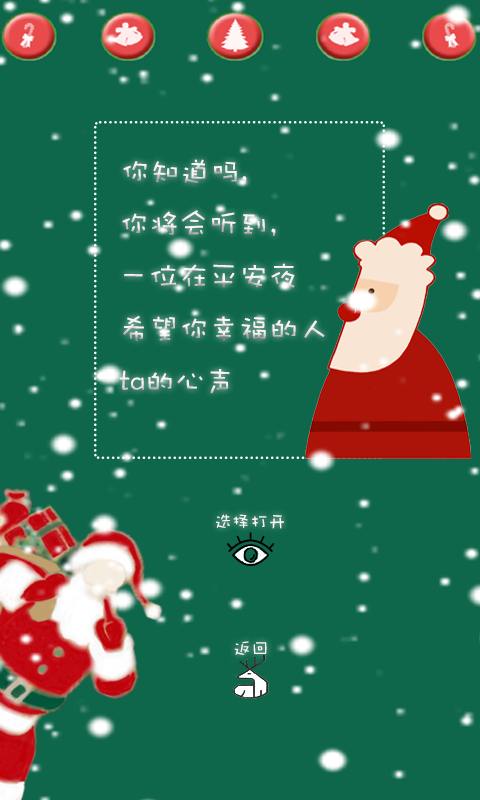
<style>
.page{position:relative;width:480px;height:800px;background:#0f674b}
.page>*{position:absolute;margin:0}
.t1{font:30px "DFWaWaSC-W5";color:#f4eae9}
.t2{font:18px "DFWaWaSC-W5";color:#fcf7f7}
</style>
<div class="page">
<p class="t1" style="left:119px;top:159px;width:206px;height:235px">你知道吗，<br>你将会听到，<br>一位在平安夜<br>希望你幸福的人<br>ta的心声</p>
<p class="t2" style="left:216px;top:514px;width:68px;height:15px">选择打开</p>
<p class="t2" style="left:234px;top:641px;width:33px;height:14px">返回</p>
</div>
